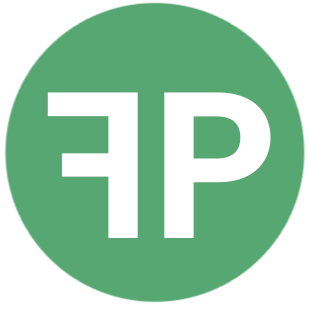
<style>
.page{position:relative;width:310px;height:310px;background:#57a772}
.page>*{position:absolute;margin:0}
.t1{font:208.4px "Poppins-SemiBold";color:#ffffff}
</style>
<div class="page">
<p class="t1" style="left:47px;top:92px;width:91px;height:146px;rotate:180deg">F</p>
<p class="t1" style="left:164px;top:92px;width:107px;height:146px">P</p>
</div>
